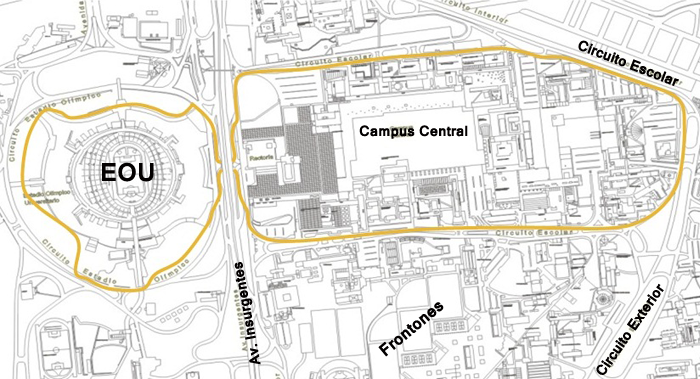
<style>
.page{position:relative;width:700px;height:379px;background:#ffffff}
.page>*{position:absolute;margin:0}
.t1{font:14px "Kartika-Bold";color:#030000}
.t2{font:24px "Kartika-Bold";color:#030000}
.t3{font:16px "Kartika-Bold";color:#030000}
</style>
<div class="page">
<p class="t1" style="left:578px;top:40px;width:101px;height:46px;rotate:21deg">Circuito Escolar</p>
<p class="t1" style="left:359px;top:125px;width:109px;height:14px">Campus Central</p>
<p class="t2" style="left:102px;top:162px;width:52px;height:20px">EOU</p>
<p class="t1" style="left:234px;top:262px;width:27px;height:103px;rotate:-100deg">Av. Insurgentes</p>
<p class="t1" style="left:596px;top:283px;width:68px;height:92px;rotate:-55deg">Circuito Exterior</p>
<p class="t3" style="left:378px;top:302px;width:66px;height:55px;rotate:-40deg">Frontones</p>
</div>
